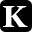
<style>
.page{position:relative;width:32px;height:32px;background:#000000}
.page>*{position:absolute;margin:0}
.t1{font:30px "Georgia-Bold";color:#ffffff}
</style>
<div class="page">
<p class="t1" style="left:3px;top:6px;width:25px;height:21px">K</p>
</div>
